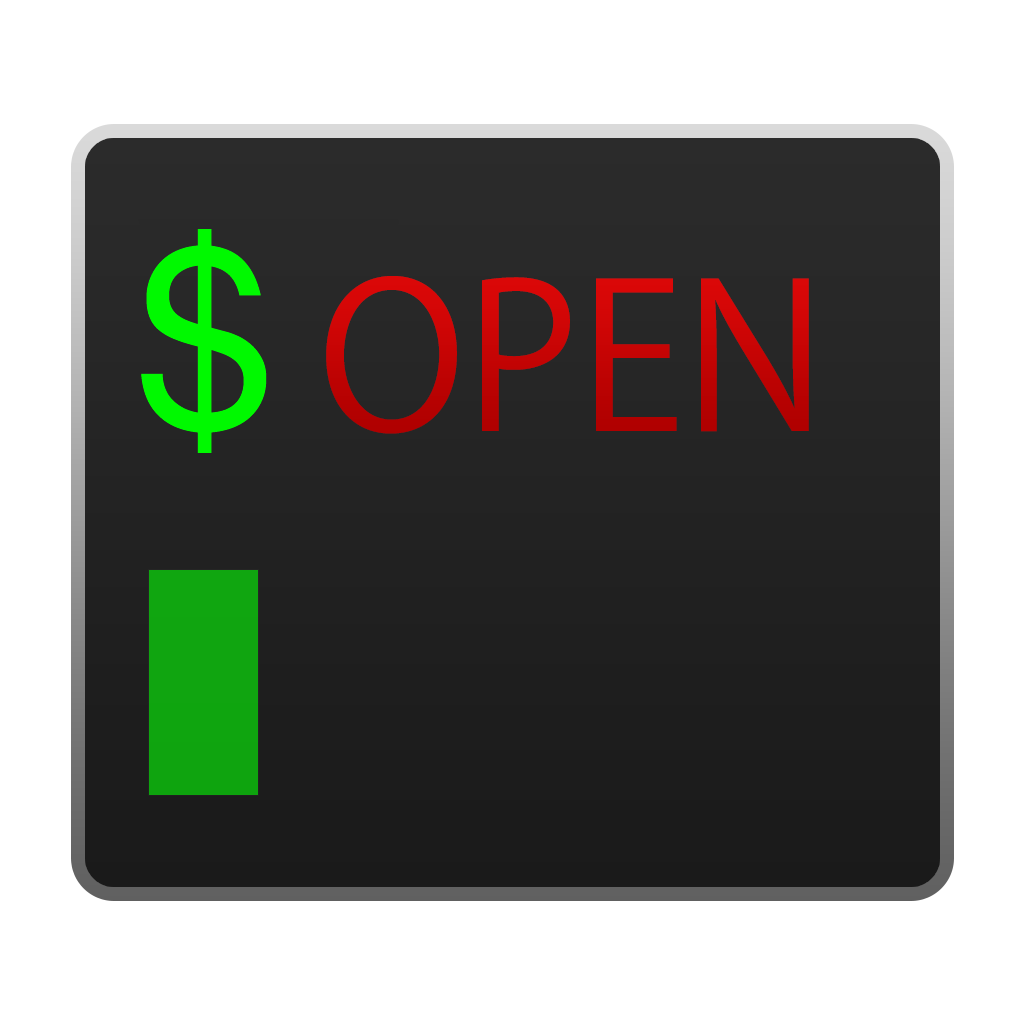
<style>
.page{position:relative;width:1024px;height:1024px;background:#ffffff}
.page>*{position:absolute;margin:0}
.t1{font:200px "KozGoPr6N-Regular";color:#c60404}
</style>
<div class="page">
<p class="t1" style="left:326px;top:276px;width:483px;height:158px">OPEN</p>
</div>
